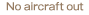
<style>
.page{position:relative;width:89px;height:15px;background:#ffffff}
.page>*{position:absolute;margin:0}
.t1{font:10px "GothicMB101Pro-DeBold";letter-spacing:-0.04em;color:#8b6e51}
</style>
<div class="page">
<p class="t1" style="left:6px;top:2px;width:78px;height:9px;opacity:0.9">No aircraft out</p>
</div>
